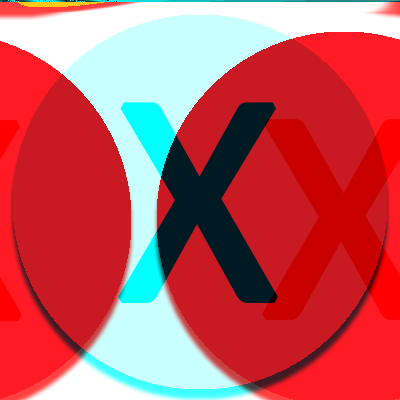
<style>
.page{position:relative;width:400px;height:400px;background:#c91a24}
.page>*{position:absolute;margin:0}
.t1{font:299.9px "Carlito";letter-spacing:-0.06em;color:#001a24;font-weight:bold}
</style>
<div class="page">
<p class="t1" style="left:118px;top:100px;width:160px;height:201px">X</p>
</div>
